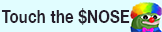
<style>
.page{position:relative;width:162px;height:32px;background:#e1fdff}
.page>*{position:absolute;margin:0}
.t1{font:17.9px "HelveticaNeue-Bold";letter-spacing:0.025em;color:#261e2b;scale:0.83 1}
</style>
<div class="page">
<p class="t1" style="left:1px;top:8px;width:129px;height:17px">Touch the $NOSE</p>
</div>
